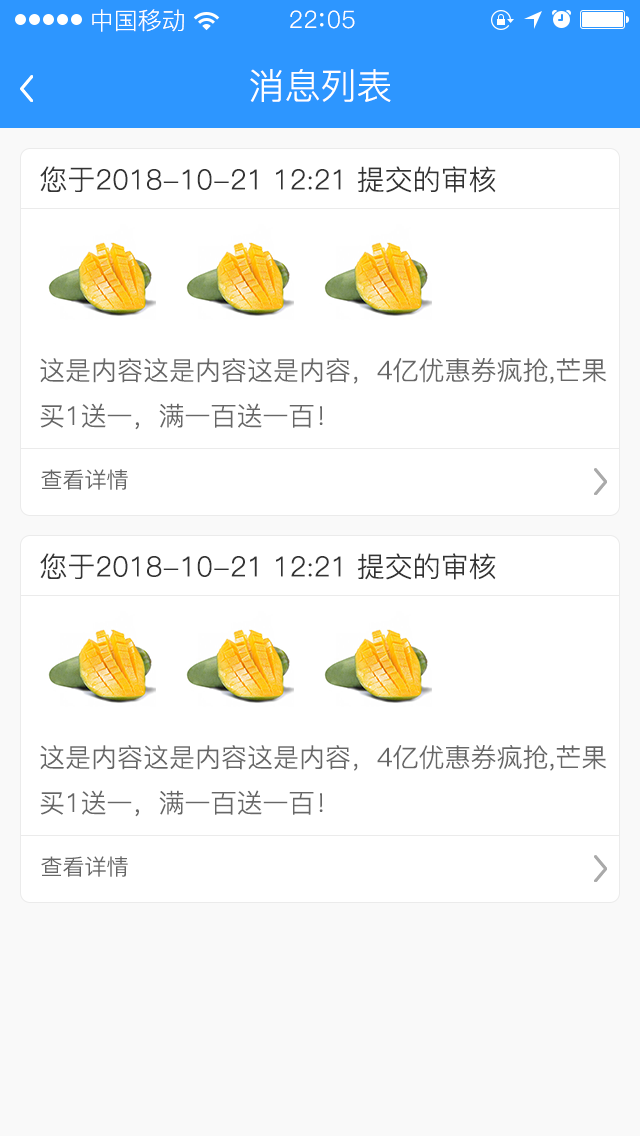
<style>
.page{position:relative;width:640px;height:1136px;background:#ffffff}
.page>*{position:absolute;margin:0}
.t1{font:24px "PingFang-SC-Regular";color:#ffffff}
.t2{font:24px "PingFang-SC-Regular";letter-spacing:0.03em;color:#ffffff}
.t3{font:36px "PingFang-SC-Regular";color:#ffffff}
.t4{font:28px "PingFang-SC-Regular";color:#333333}
.t5{font:26px "PingFang-SC-Regular";color:#666666}
.t6{font:22px "PingFang-SC-Regular";color:#666666}
</style>
<div class="page">
<p class="t1" style="left:92px;top:9px;width:92px;height:23px">中国移动</p>
<p class="t2" style="left:290px;top:10px;width:65px;height:19px">22 05</p>
<p class="t3" style="left:250px;top:69px;width:141px;height:33px">消息列表</p>
<p class="t4" style="left:40px;top:166px;width:456px;height:27px">您于2018-10-21 12:21 提交的审核</p>
<p class="t5" style="left:40px;top:358px;width:567px;height:72px">这是内容这是内容这是内容，4亿优惠券疯抢,芒果<br>买1送一，满一百送一百！</p>
<p class="t6" style="left:41px;top:469px;width:87px;height:21px">查看详情</p>
<p class="t4" style="left:40px;top:553px;width:456px;height:27px">您于2018-10-21 12:21 提交的审核</p>
<p class="t5" style="left:40px;top:745px;width:567px;height:72px">这是内容这是内容这是内容，4亿优惠券疯抢,芒果<br>买1送一，满一百送一百！</p>
<p class="t6" style="left:41px;top:856px;width:87px;height:21px">查看详情</p>
</div>
